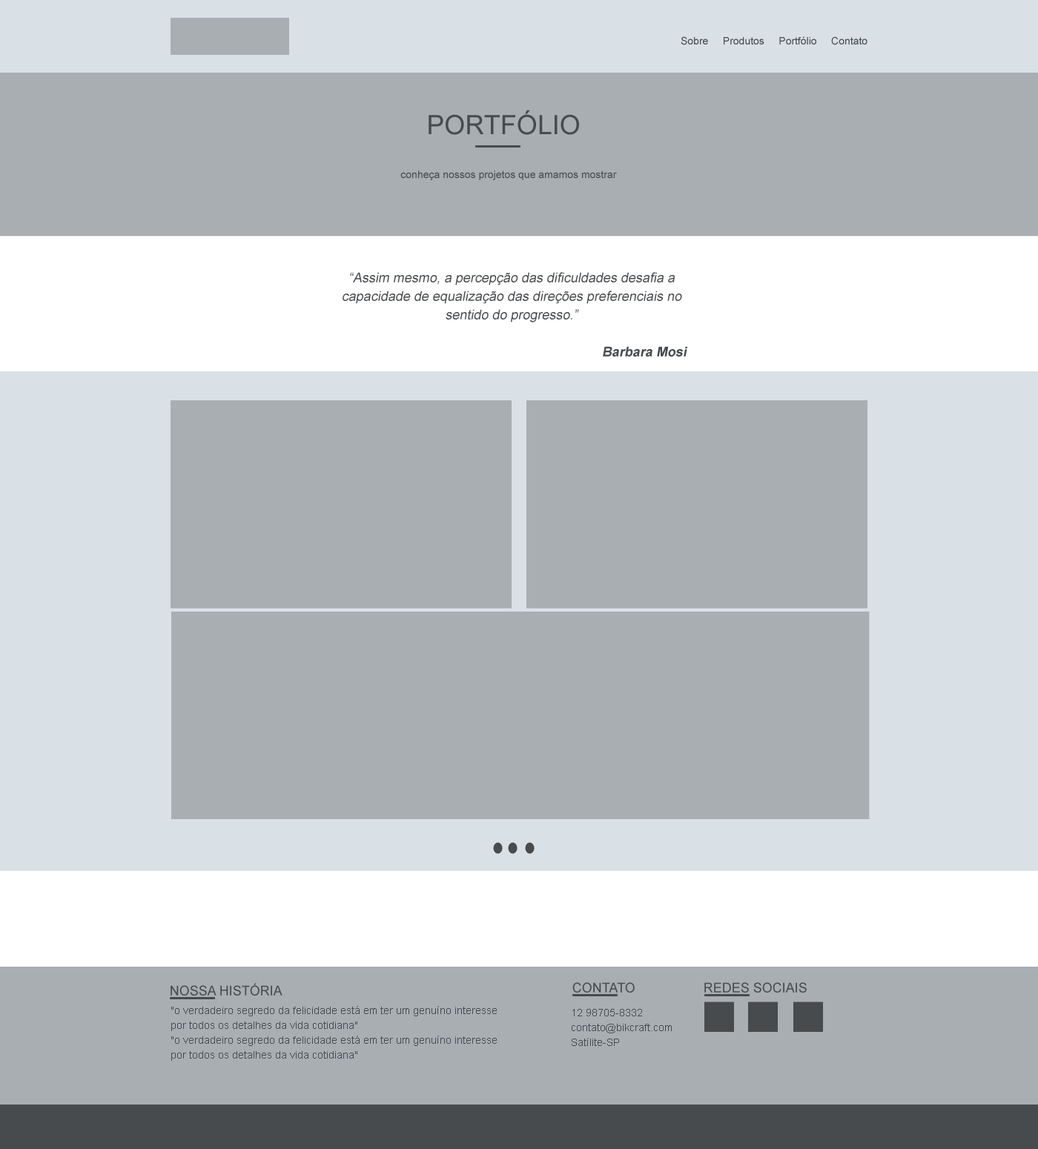
<style>
.page{position:relative;width:1038px;height:1149px;background:#a9aeb3}
.page>*{position:absolute;margin:0}
.t1{font:10.4px "ArialMT";color:#484b4d}
.t2{font:26.7px "ArialMT";color:#484b4d;text-transform:uppercase}
.t3{font:13.3px/18.5px "ArialMT";color:#484b4d;font-style:italic}
.t4{font:13.3px/18.5px "Arial-BoldMT";color:#484b4d;font-style:italic}
.t5{font:13.3px "ArialMT";color:#484b4d;text-transform:uppercase}
.t6{font:10.4px/14.8px "ArialMT";color:#484b4d}
</style>
<div class="page">
<p class="t1" style="left:681px;top:36px;width:186px;height:9px">Sobre     Produtos     Portfólio     Contato</p>
<p class="t2" style="left:428px;top:110px;width:151px;height:25px">PORTFóLIO</p>
<p class="t1" style="left:400px;top:170px;width:217px;height:10px">conheça nossos projetos que amamos mostrar</p>
<p class="t3" style="left:342px;top:272px;width:345px;height:85px;text-align:center">“Assim mesmo, a percepção das dificuldades desafia a capacidade de equalização das direções preferenciais no sentido do progresso.”<br><br><span class="t4">Barbara Mosi</span></p>
<p class="t5" style="left:170px;top:983px;width:112px;height:13px">Nossa História</p>
<p class="t5" style="left:572px;top:982px;width:63px;height:11px">contato</p>
<p class="t5" style="left:704px;top:982px;width:103px;height:11px">REDES SOCIAIS</p>
<p class="t6" style="left:171px;top:1006px;width:326px;height:55px;text-align:center">"o verdadeiro segredo da felicidade está em ter um genuíno interesse por todos os detalhes da vida cotidiana"<br>"o verdadeiro segredo da felicidade está em ter um genuíno interesse por todos os detalhes da vida cotidiana"</p>
<p class="t6" style="left:572px;top:1009px;width:100px;height:37px">12 98705-8332<br>contato@bikcraft.com<br>Satílite-SP</p>
</div>
